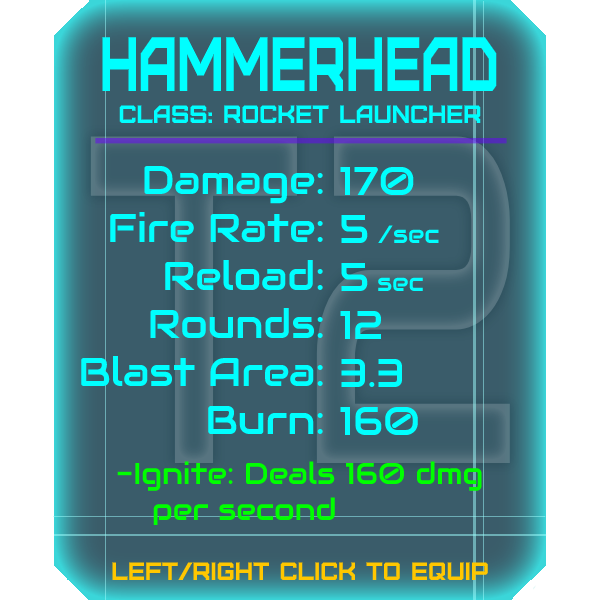
<style>
.page{position:relative;width:600px;height:600px;background:#3a5c6a}
.page>*{position:absolute;margin:0}
.t1{font:76.8px "Furore";color:#00ffff;scale:0.7 1}
.t2{font:25px "Furore";color:#00ffff}
.t3{font:40px "Audiowide-Regular";color:#00ffff}
.t4{font:25px "Audiowide-Regular";color:#00ffff}
.t5{font:30px "Audiowide-Regular";color:#00ff00}
.t6{font:40px "Audiowide-Regular";color:#00ff00}
.t7{font:25px "Furore";color:#ffc700}
</style>
<div class="page">
<p class="t1" style="left:102px;top:37px;width:395px;height:54px">Hammerhead</p>
<p class="t2" style="left:119px;top:105px;width:362px;height:18px">Class: rocket launcher</p>
<p class="t3" style="left:81px;top:165px;width:242px;height:269px;text-align:right">Damage:<br>Fire Rate:<br>Reload:<br>Rounds:<br>Blast Area:<br>Burn:</p>
<p class="t3" style="left:340px;top:166px;width:99px;height:269px">170<br>5 <span class="t4">/sec<br></span>5 <span class="t4">sec<br></span>12<br>3.3<br>160</p>
<p class="t5" style="left:117px;top:461px;width:365px;height:64px"><span class="t6"><br><br><br><br><br><br></span>-Ignite: Deals 160 dmg<br> per second</p>
<p class="t7" style="left:112px;top:562px;width:376px;height:18px">left/right click to equip</p>
</div>
